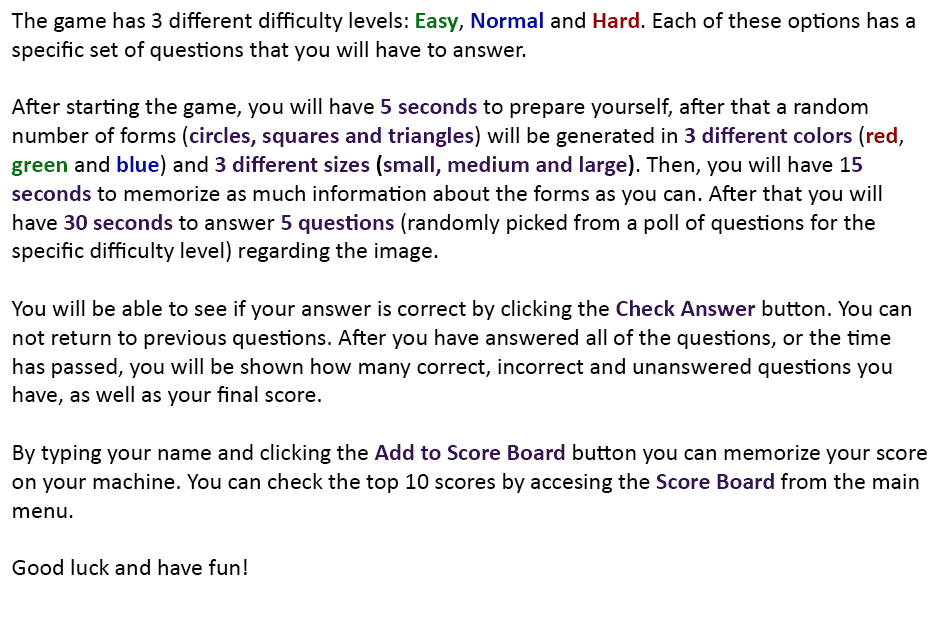
<style>
.page{position:relative;width:937px;height:622px;background:#ffffff}
.page>*{position:absolute;margin:0}
.t1{font:24px "Calibri";color:#000000}
.t2{font:24px "Calibri-Bold";color:#057312}
.t3{font:24px "Calibri-Bold";color:#000ca6}
.t4{font:24px "Calibri-Bold";color:#950000}
.t5{font:24px "Calibri-Bold";color:#371356}
.t6{font:24px "Calibri-Bold";color:#000000}
</style>
<div class="page">
<p class="t1" style="left:11px;top:12px;width:916px;height:563px">The game has 3 different difficulty levels: <span class="t2">Easy</span>, <span class="t3">Normal </span>and <span class="t4">Hard</span>. Each of these options has a specific set of questions that you will have to answer. <br><br>After starting the game, you will have <span class="t5">5 seconds</span> to prepare yourself, after that a random number of forms (<span class="t5">circles, squares and triangles</span>) will be generated in <span class="t5">3 different colors</span> (<span class="t4">red</span>, <span class="t2">green </span>and <span class="t3">blue</span>) and <span class="t5">3 different sizes</span><span class="t6"> (</span><span class="t5">small, medium and large</span><span class="t6">)</span>. Then, you will have 1<span class="t5">5 seconds</span> to memorize as much information about the forms as you can. After that you will have <span class="t5">30 seconds</span> to answer <span class="t5">5 questions</span> (randomly picked from a poll of questions for the specific difficulty level) regarding the image.<br><br>You will be able to see if your answer is correct by clicking the <span class="t5">Check Answer</span> button. You can not return to previous questions. After you have answered all of the questions, or the time has passed, you will be shown how many correct, incorrect and unanswered questions you have, as well as your final score. <br><br>By typing your name and clicking the <span class="t5">Add to Score Board</span> button you can memorize your score on your machine. You can check the top 10 scores by accesing the <span class="t5">Score Board</span> from the main menu.<br><br>Good luck and have fun!</p>
</div>
